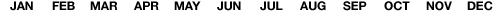
<style>
.page{position:relative;width:500px;height:12px;background:#ffffff}
.page>*{position:absolute;margin:0}
.t1{font:12px "HelveticaNeue-Bold";color:#000000}
</style>
<div class="page">
<p class="t1" style="left:10px;top:1px;width:23px;height:10px">JAN</p>
<p class="t1" style="left:52px;top:1px;width:23px;height:9px">FEB</p>
<p class="t1" style="left:90px;top:1px;width:28px;height:9px">MAR</p>
<p class="t1" style="left:134px;top:1px;width:25px;height:9px">APR</p>
<p class="t1" style="left:174px;top:1px;width:27px;height:9px">MAY</p>
<p class="t1" style="left:217px;top:1px;width:24px;height:10px">JUN</p>
<p class="t1" style="left:260px;top:1px;width:23px;height:10px">JUL</p>
<p class="t1" style="left:300px;top:1px;width:26px;height:10px">AUG</p>
<p class="t1" style="left:343px;top:1px;width:24px;height:10px">SEP</p>
<p class="t1" style="left:384px;top:1px;width:26px;height:10px">OCT</p>
<p class="t1" style="left:426px;top:1px;width:26px;height:10px">NOV</p>
<p class="t1" style="left:467px;top:1px;width:26px;height:10px">DEC</p>
</div>
